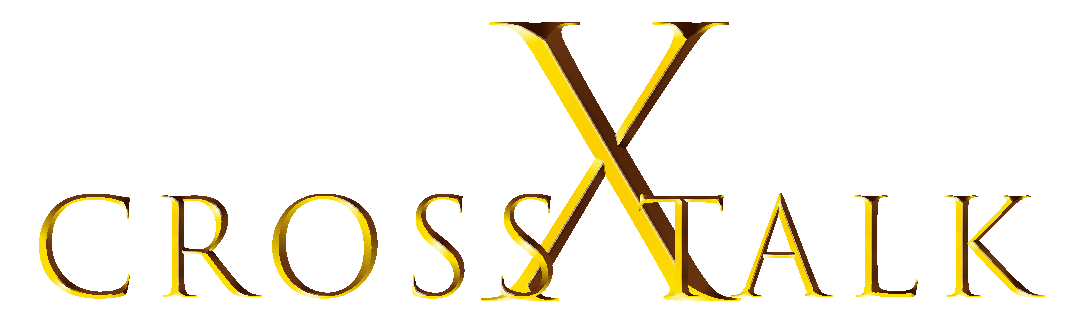
<style>
.page{position:relative;width:1080px;height:329px;background:#ffffff}
.page>*{position:absolute;margin:0}
.t1{font:368.6px "TrajanColor-Concept";letter-spacing:0.08em;font-weight:bold}
.t2{font:132.7px "TrajanColor-Concept";letter-spacing:0.08em;font-weight:bold}
</style>
<div class="page">
<p class="t1" style="left:481px;top:22px;width:260px;height:279px">x</p>
<p class="t2" style="left:39px;top:193px;width:1006px;height:106px">Cross talk</p>
</div>
